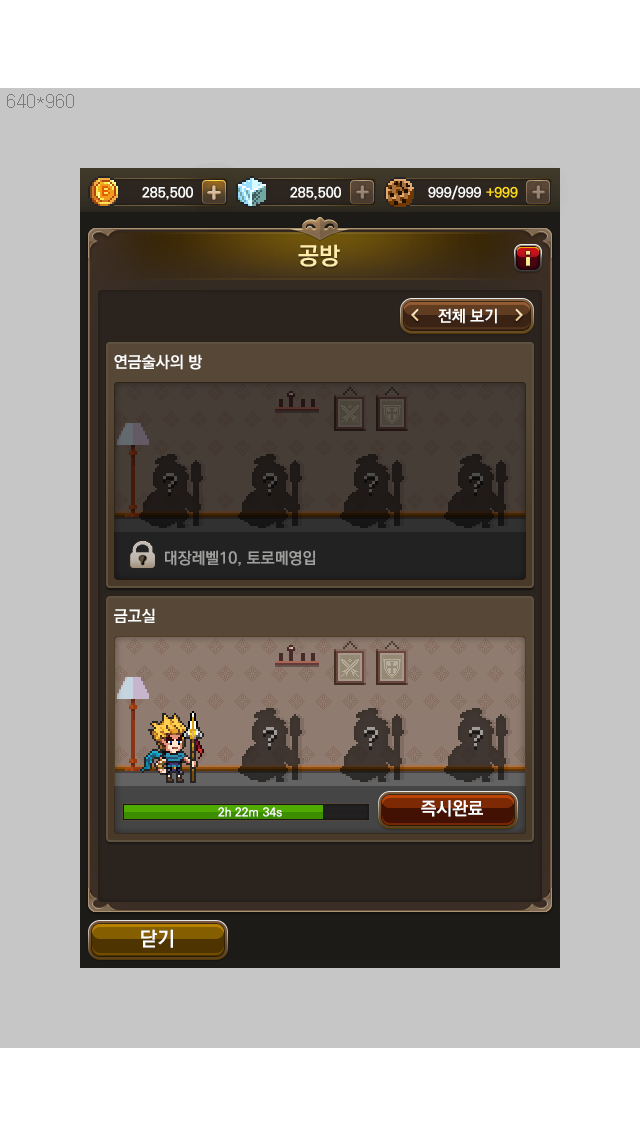
<style>
.page{position:relative;width:640px;height:1136px;background:#c6c6c6}
.page>*{position:absolute;margin:0}
.t1{font:24px "KoPubDotumBold";color:#ffedab}
.t2{font:16px "KoPubDotumBold";color:#ffffff}
.t3{font:24px "VolterGoldfish";color:#4f4d4c}
.t4{font:16px "KoPubDotumBold";color:#9f9f9d}
.t5{font:24px "VolterGoldfish";color:#9e9b99}
.t6{font:12px "KoPubDotumBold";color:#ffffff}
.t7{font:18px "KoPubDotumBold";color:#ffffff}
.t8{font:20px "KoPubDotumBold";color:#ffffff}
</style>
<div class="page">
<p class="t1" style="left:298px;top:244px;width:42px;height:23px">공방</p>
<p class="t2" style="left:438px;top:308px;width:59px;height:16px">전체 보기</p>
<p class="t2" style="left:114px;top:354px;width:88px;height:16px">연금술사의 방</p>
<p class="t2" style="left:114px;top:354px;width:88px;height:16px">연금술사의 방</p>
<p class="t3" style="left:163px;top:473px;width:14px;height:19px">?</p>
<p class="t3" style="left:263px;top:473px;width:14px;height:19px">?</p>
<p class="t3" style="left:364px;top:473px;width:14px;height:19px">?</p>
<p class="t3" style="left:469px;top:473px;width:14px;height:19px">?</p>
<p class="t4" style="left:165px;top:550px;width:150px;height:16px">대장레벨10, 토로메영입</p>
<p class="t4" style="left:165px;top:550px;width:150px;height:16px">대장레벨10, 토로메영입</p>
<p class="t2" style="left:114px;top:608px;width:41px;height:15px">금고실</p>
<p class="t5" style="left:263px;top:727px;width:14px;height:19px">?</p>
<p class="t5" style="left:364px;top:727px;width:14px;height:19px">?</p>
<p class="t5" style="left:469px;top:727px;width:14px;height:19px">?</p>
<p class="t6" style="left:218px;top:807px;width:64px;height:10px">2h 22m 34s</p>
<p class="t7" style="left:421px;top:800px;width:62px;height:17px">즉시완료</p>
<p class="t8" style="left:141px;top:929px;width:32px;height:19px">닫기</p>
</div>
